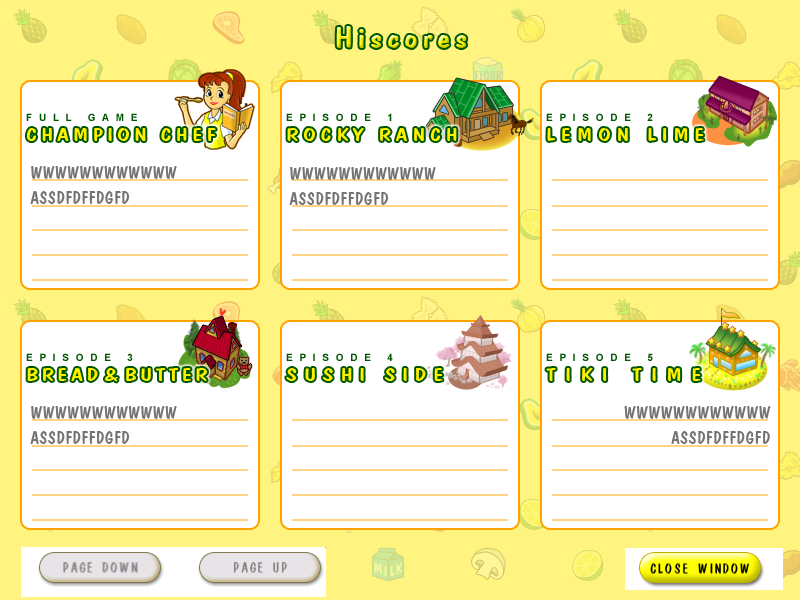
<style>
.page{position:relative;width:800px;height:600px;background:#ffffff}
.page>*{position:absolute;margin:0}
.t1{font:30px "DomCasualBT-Regular";letter-spacing:0.1em;scale:1.32 1}
.t2{font:10px "Arial-BoldMT";letter-spacing:0.2em;color:#005600;text-transform:uppercase}
.t3{font:19.2px "DomCasualBT-Regular";letter-spacing:0.15em;color:#fff000;text-transform:uppercase;scale:1.32 1}
.t4{font:19.2px "DomCasualBT-Regular";letter-spacing:0.18em;color:#fff000;text-transform:uppercase;scale:1.32 1}
.t5{font:19.2px "DomCasualBT-Regular";letter-spacing:0.22em;color:#fff000;text-transform:uppercase;scale:1.32 1}
.t6{font:18px/25px "DomCasualBT-Regular";letter-spacing:0.025em;color:#737373}
.t7{font:19.2px "DomCasualBT-Regular";letter-spacing:0.12em;color:#fff000;text-transform:uppercase;scale:1.32 1}
.t8{font:19.2px "DomCasualBT-Regular";letter-spacing:0.25em;color:#fff000;text-transform:uppercase;scale:1.32 1}
.t9{font:19.2px "DomCasualBT-Regular";letter-spacing:0.36em;color:#fff000;text-transform:uppercase;scale:1.32 1}
</style>
<div class="page">
<p class="t1" style="left:336px;top:26px;width:131px;height:22px">Hiscores</p>
<p class="t2" style="left:26px;top:113px;width:111px;height:8px">F u l l   G a m e</p>
<p class="t2" style="left:286px;top:113px;width:106px;height:8px">e p i s o d e   1</p>
<p class="t2" style="left:546px;top:113px;width:107px;height:8px">e p i s o d e   2</p>
<p class="t3" style="left:26px;top:128px;width:190px;height:13px">Champion Chef</p>
<p class="t4" style="left:287px;top:127px;width:170px;height:14px">Rocky Ranch</p>
<p class="t5" style="left:547px;top:128px;width:157px;height:13px">Lemon Lime</p>
<p class="t6" style="left:30px;top:166px;width:147px;height:38px">WWWWWWWWWWWW<br>ASSDFDFFDGFD</p>
<p class="t6" style="left:289px;top:167px;width:147px;height:38px">WWWWWWWWWWWW<br>ASSDFDFFDGFD</p>
<p class="t2" style="left:26px;top:353px;width:107px;height:8px">e p i s o d e   3</p>
<p class="t2" style="left:286px;top:353px;width:107px;height:8px">e p i s o d e   4</p>
<p class="t2" style="left:546px;top:353px;width:107px;height:8px">e p i s o d e   5</p>
<p class="t7" style="left:27px;top:368px;width:180px;height:14px">Brea<span class="t8">d&amp;</span>Butter</p>
<p class="t8" style="left:286px;top:368px;width:157px;height:13px">Sushi Side</p>
<p class="t9" style="left:546px;top:367px;width:155px;height:14px">Tiki Time</p>
<p class="t6" style="left:30px;top:406px;width:147px;height:38px">WWWWWWWWWWWW<br>ASSDFDFFDGFD</p>
<p class="t6" style="left:624px;top:406px;width:147px;height:38px;text-align:right">WWWWWWWWWWWW<br>ASSDFDFFDGFD</p>
</div>
